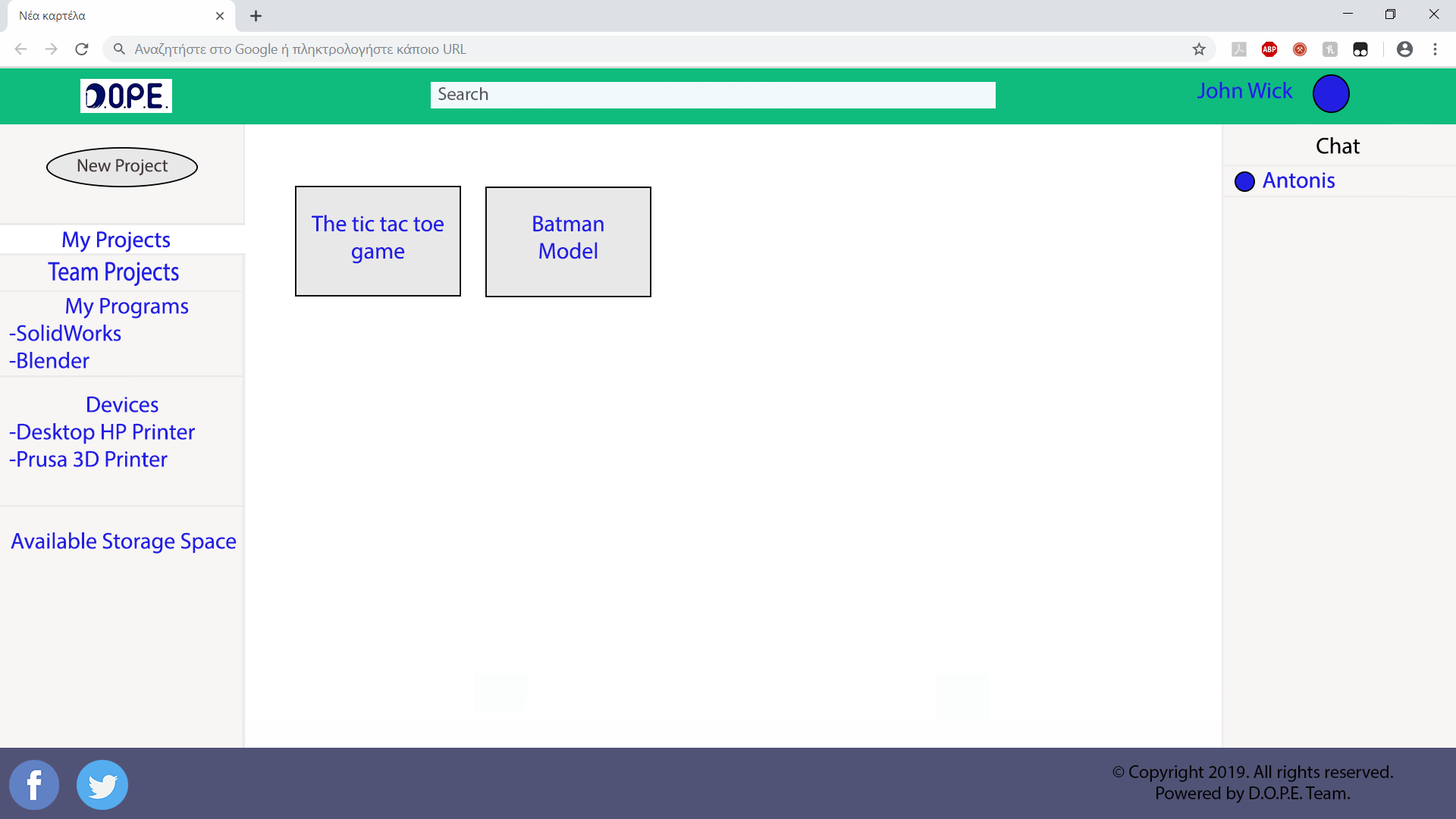
<style>
.page{position:relative;width:1456px;height:819px;background:#ffffff}
.page>*{position:absolute;margin:0}
.t1{font:18.2px "MyriadPro-Regular";color:#57575d}
.t2{font:22.7px "MyriadPro-Regular";color:#221fe3}
.t3{font:22.7px "MyriadPro-Regular";color:#000201}
.t4{font:18.2px "MyriadPro-Regular";color:#463d3d}
.t5{font:18.2px "MyriadPro-Regular";color:#050505}
</style>
<div class="page">
<p class="t1" style="left:438px;top:87px;width:50px;height:13px">Search</p>
<p class="t2" style="left:1197px;top:82px;width:96px;height:17px">John Wick</p>
<p class="t3" style="left:1316px;top:137px;width:44px;height:17px">Chat</p>
<p class="t4" style="left:77px;top:158px;width:91px;height:18px">New Project</p>
<p class="t2" style="left:312px;top:215px;width:132px;height:49px;text-align:center">The tic tac toe game</p>
<p class="t2" style="left:533px;top:215px;width:71px;height:44px;text-align:center">Batman <br>Model</p>
<p class="t2" style="left:9px;top:297px;width:180px;height:72px;text-align:center">My Programs<br>-SolidWorks<br>-Blender</p>
<p class="t2" style="left:87px;top:396px;width:71px;height:17px">Devices</p>
<p class="t2" style="left:9px;top:423px;width:186px;height:44px">-Desktop HP Printer<br>-Prusa 3D Printer</p>
<p class="t2" style="left:11px;top:532px;width:226px;height:22px">Available Storage Space</p>
<p class="t5" style="left:1112px;top:765px;width:281px;height:38px;text-align:center">© Copyright 2019. All rights reserved. Powered by D.O.P.E. Team.</p>
</div>
